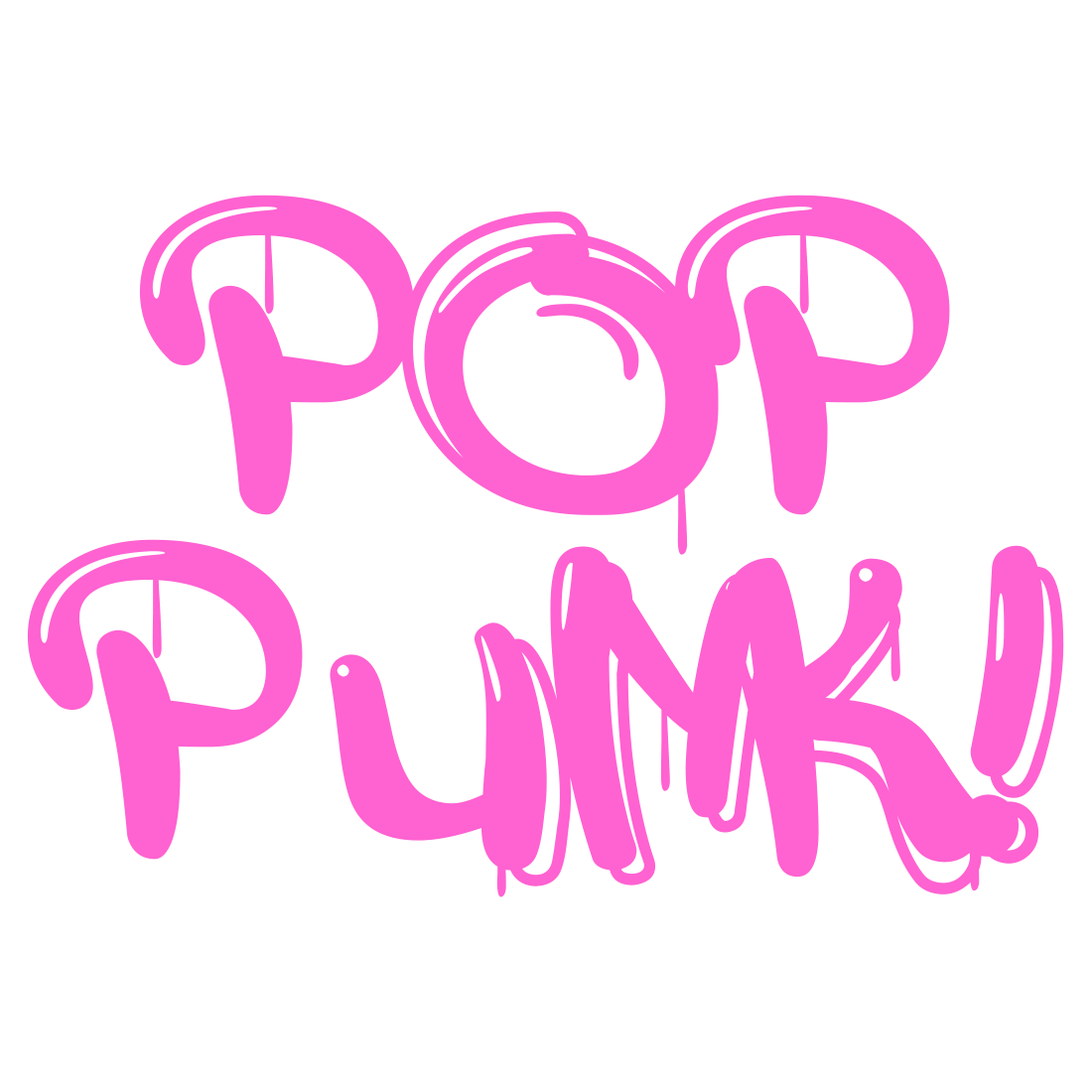
<style>
.page{position:relative;width:1092px;height:1092px;background:#ffffff}
.page>*{position:absolute;margin:0}
.t1{font:375.7px/344.3px "aAttackGraffiti";letter-spacing:0.02em;color:#ff62d1}
</style>
<div class="page">
<p class="t1" style="left:27px;top:195px;width:1037px;height:702px;text-align:center">POP<br>PUNK!</p>
</div>
